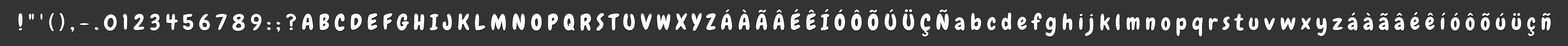
<style>
.page{position:relative;width:1568px;height:46px;background:#333333}
.page>*{position:absolute;margin:0}
.t1{font:21.9px "Chewy";color:#ffffff}
</style>
<div class="page">
<p class="t1" style="left:18px;top:9px;width:1533px;height:27px">! " ' ( ) , - . 0 1 2 3 4 5 6 7 8 9 : ; ? A B C D E F G H I J K L M N O P Q R S T U V W X Y Z Á À Ã Â É Ê Í Ó Ô Õ Ú Ü Ç Ñ a b c d e f g h i j k l m n o p q r s t u v w x y z á à ã â é ê í ó ô õ ú ü ç ñ</p>
</div>
